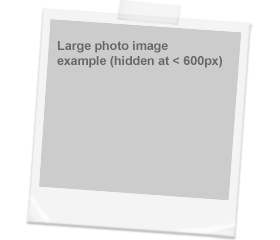
<style>
.page{position:relative;width:280px;height:240px;background:#cccccc}
.page>*{position:absolute;margin:0}
.t1{font:12.4px/15.2px "Arial-BoldMT";color:#666666}
</style>
<div class="page">
<p class="t1" style="left:57px;top:41px;width:165px;height:27px">Large photo image<br>example (hidden at &lt; 600px)</p>
</div>
